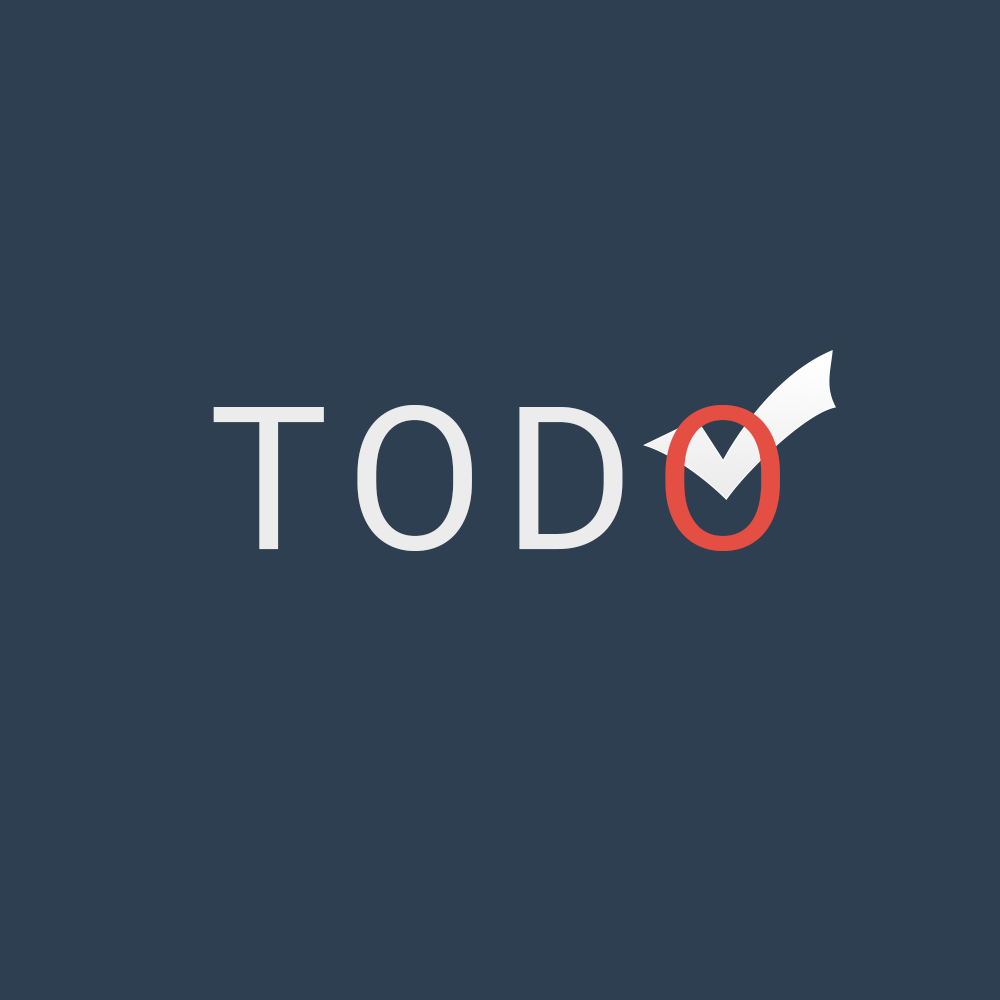
<style>
.page{position:relative;width:1000px;height:1000px;background:#2d3f50}
.page>*{position:absolute;margin:0}
.t1{font:200px "Roboto-Regular";letter-spacing:0.1em;color:#ececec;text-transform:uppercase}
.t2{font:200px "Roboto-Regular";letter-spacing:0.1em;color:#e54e42;text-transform:uppercase}
</style>
<div class="page">
<p class="t1" style="left:213px;top:405px;width:567px;height:146px">tod<span class="t2">o</span></p>
</div>
